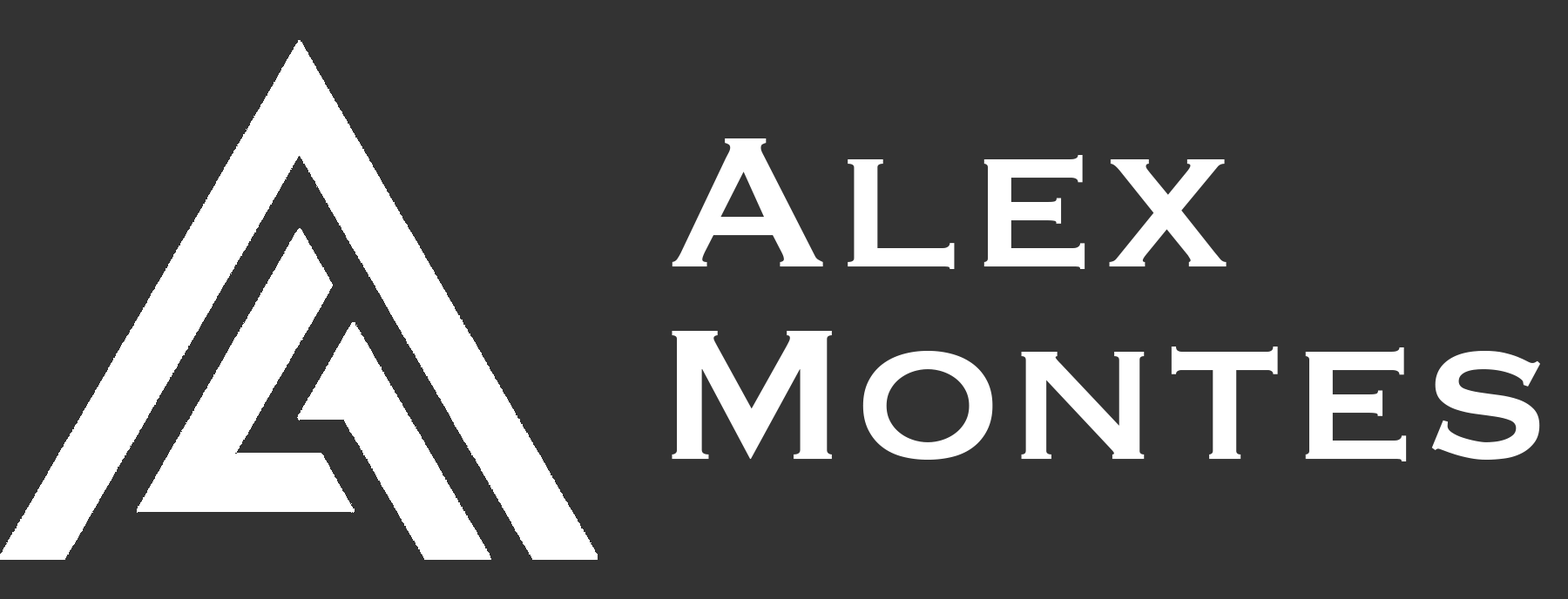
<style>
.page{position:relative;width:1568px;height:599px;background:#333333}
.page>*{position:absolute;margin:0}
.t1{font:243.2px "Copperplate";color:#ffffff}
</style>
<div class="page">
<p class="t1" style="left:672px;top:139px;width:555px;height:130px">Alex</p>
<p class="t1" style="left:672px;top:331px;width:868px;height:131px">Montes</p>
</div>
